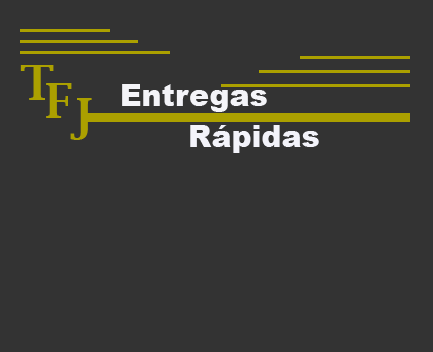
<style>
.page{position:relative;width:433px;height:352px;background:#333333}
.page>*{position:absolute;margin:0}
.t1{font:48px "LucidaBright-Demi";color:#aba000}
.t2{font:30px "Arial-Black";color:#f4f4f8}
.t3{font:30px "Arial-Black";color:#f3f3fa}
</style>
<div class="page">
<p class="t1" style="left:20px;top:65px;width:34px;height:35px">T</p>
<p class="t1" style="left:46px;top:83px;width:26px;height:35px">F</p>
<p class="t2" style="left:122px;top:84px;width:145px;height:28px">Entregas</p>
<p class="t1" style="left:70px;top:98px;width:22px;height:42px">J</p>
<p class="t3" style="left:190px;top:125px;width:129px;height:28px">Rápidas</p>
</div>
